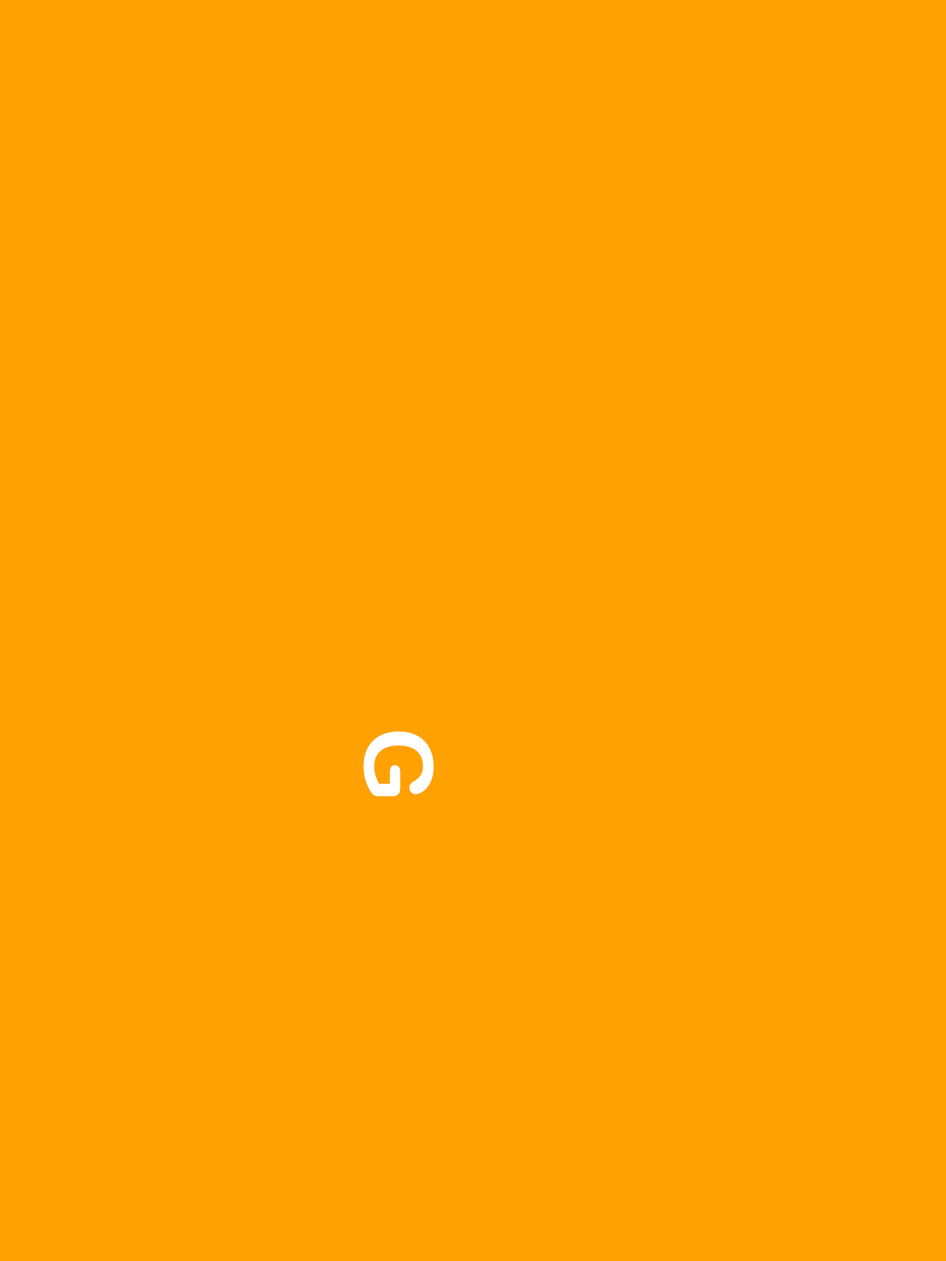
<style>
.page{position:relative;width:946px;height:1261px;background:#ffa100}
.page>*{position:absolute;margin:0}
.t1{font:94.6px "ArialRoundedMTBold";color:#ffffff}
</style>
<div class="page">
<p class="t1" style="left:363px;top:731px;width:71px;height:65px;rotate:90deg">G</p>
</div>
